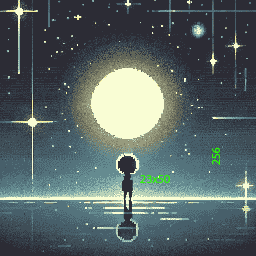
<style>
.page{position:relative;width:256px;height:256px;background:#2c2c35}
.page>*{position:absolute;margin:0}
.t1{font:12px "MyriadPro-Regular";color:#2aff00}
.t2{font:12px "MyriadPro-Regular";color:#2cf407}
</style>
<div class="page">
<p class="t1" style="left:212px;top:147px;width:8px;height:18px;rotate:-90deg">256</p>
<p class="t2" style="left:140px;top:175px;width:30px;height:8px">23x50</p>
</div>
